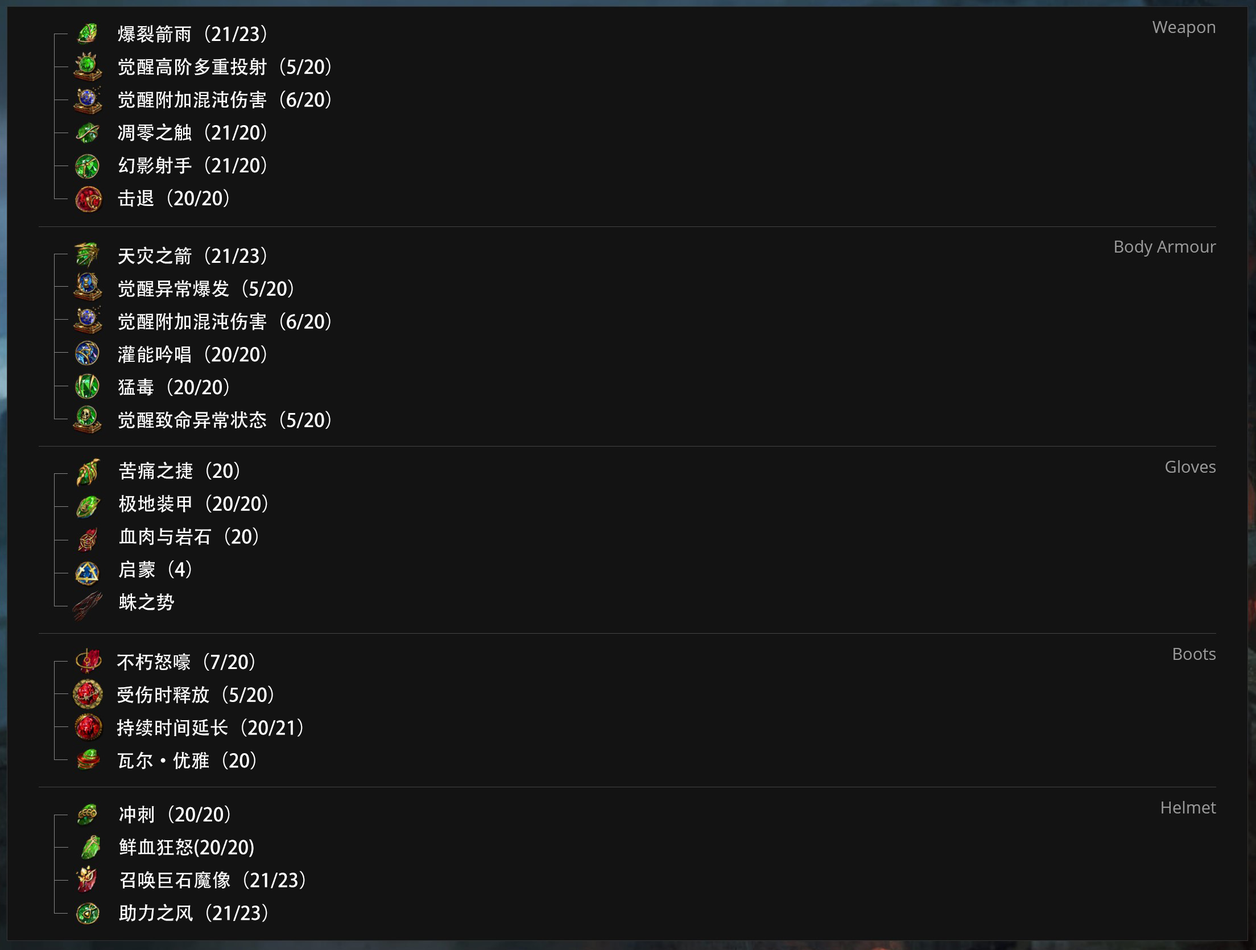
<style>
.page{position:relative;width:1256px;height:950px;background:#131313}
.page>*{position:absolute;margin:0}
.t1{font:18.8px "AdobeHeitiStd-Regular";color:#ffffff}
</style>
<div class="page">
<p class="t1" style="left:118px;top:25px;width:212px;height:182px">爆裂箭雨（21/23）<br>觉醒高阶多重投射（5/20）<br>觉醒附加混沌伤害（6/20）<br>凋零之触（21/20）<br>幻影射手（21/20）<br>击退（20/20）</p>
<p class="t1" style="left:118px;top:246px;width:212px;height:183px">天灾之箭（21/23）<br>觉醒异常爆发（5/20）<br>觉醒附加混沌伤害（6/20）<br>灌能吟唱（20/20）<br>猛毒（20/20）<br>觉醒致命异常状态（5/20）</p>
<p class="t1" style="left:119px;top:461px;width:148px;height:150px">苦痛之捷（20）<br>极地装甲（20/20）<br>血肉与岩石（20）<br>启蒙（4）<br>蛛之势</p>
<p class="t1" style="left:117px;top:653px;width:186px;height:116px">不朽怒嚎（7/20）<br>受伤时释放（5/20）<br>持续时间延长（20/21）<br>瓦尔·优雅（20）</p>
<p class="t1" style="left:119px;top:805px;width:186px;height:117px">冲刺（20/20）<br>鲜血狂怒(20/20)<br>召唤巨石魔像（21/23）<br>助力之风（21/23）</p>
</div>
